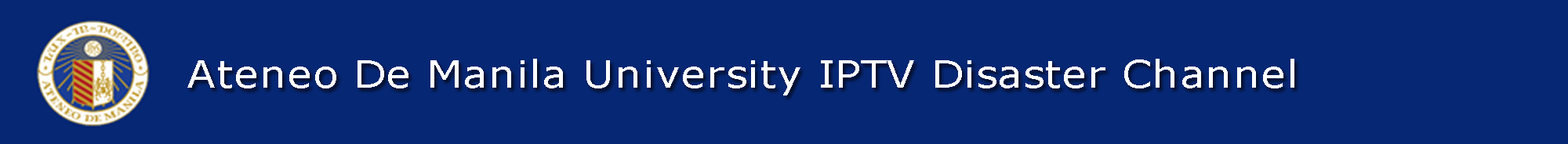
<style>
.page{position:relative;width:1568px;height:144px;background:#062774}
.page>*{position:absolute;margin:0}
.t1{font:37.6px "Verdana";color:#ffffff;scale:1.13 1}
</style>
<div class="page">
<p class="t1" style="left:187px;top:59px;width:1107px;height:37px">Ateneo De Manila University IPTV Disaster Channel</p>
</div>
